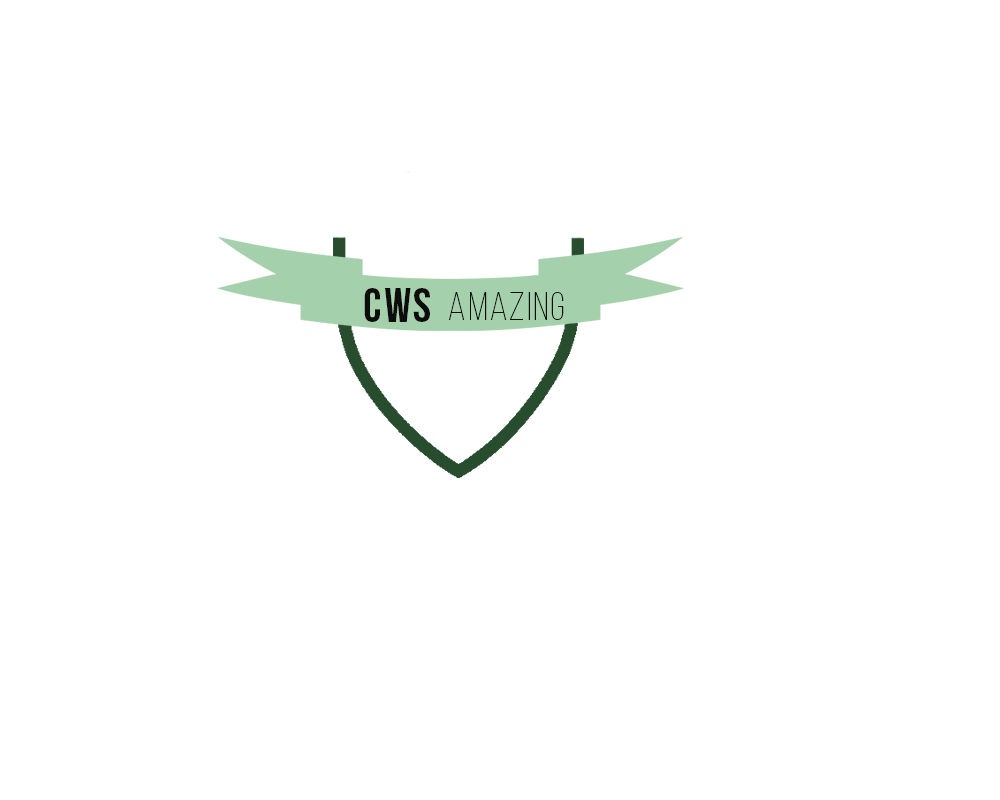
<style>
.page{position:relative;width:1000px;height:800px;background:#ffffff}
.page>*{position:absolute;margin:0}
.t1{font:48px "BebasNeueBold";letter-spacing:0.05em;color:#0d0c0c}
.t2{font:40px "BebasNeueLight";letter-spacing:0.05em;color:#0d0c0c}
</style>
<div class="page">
<p class="t1" style="left:364px;top:288px;width:66px;height:34px">CWS</p>
<p class="t2" style="left:449px;top:292px;width:115px;height:28px">amazing</p>
</div>
